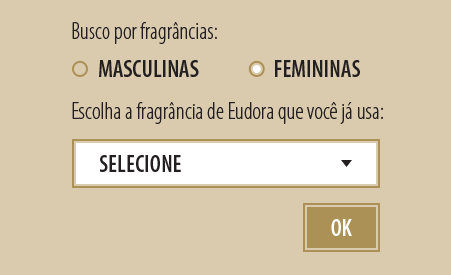
<style>
.page{position:relative;width:451px;height:275px;background:#dacbae}
.page>*{position:absolute;margin:0}
.t1{font:24.2px "MyriadPro-LightCond";color:#231f20}
.t2{font:24.2px "MyriadPro-SemiboldCond";color:#231f20;text-transform:uppercase}
.t3{font:24px "MyriadPro-LightCond";color:#231f20}
.t4{font:24px "MyriadPro-SemiboldCond";color:#231f20;text-transform:uppercase}
</style>
<div class="page">
<p class="t1" style="left:72px;top:22px;width:145px;height:22px">Busco por fragrâncias:</p>
<p class="t2" style="left:99px;top:60px;width:100px;height:17px">masculinas</p>
<p class="t2" style="left:275px;top:60px;width:85px;height:17px">femininas</p>
<p class="t3" style="left:72px;top:102px;width:311px;height:22px">Escolha a fragrância de Eudora que você já usa:</p>
<p class="t4" style="left:99px;top:155px;width:82px;height:17px">selecione</p>
</div>
